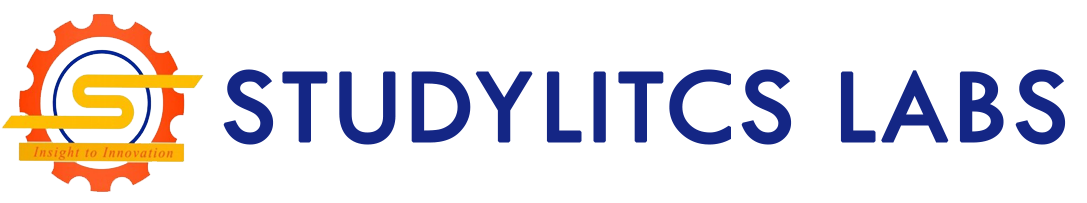
<style>
.page{position:relative;width:1087px;height:203px;background:#ffffff}
.page>*{position:absolute;margin:0}
.t1{font:110px "TwCenMT-Regular";letter-spacing:0.02em;color:#142685;font-weight:bold}
</style>
<div class="page">
<p class="t1" style="left:223px;top:69px;width:843px;height:76px">STUDYLITCS LABS</p>
</div>
